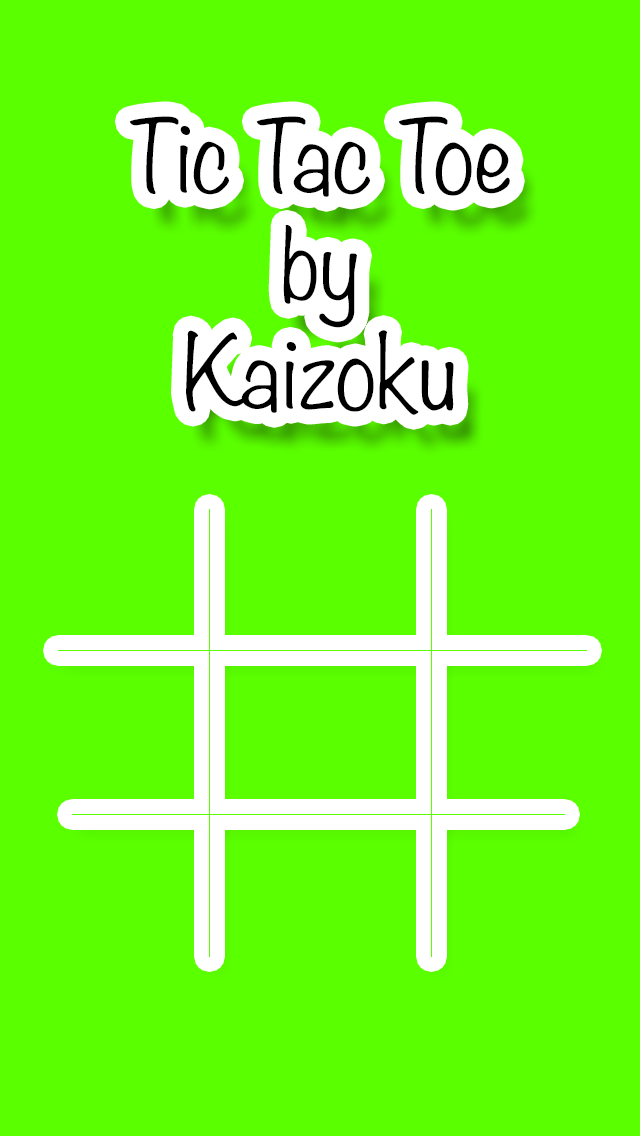
<style>
.page{position:relative;width:640px;height:1136px;background:#5aff00}
.page>*{position:absolute;margin:0}
.t1{font:90px "Noteworthy-Light";color:#000000}
</style>
<div class="page">
<p class="t1" style="left:129px;top:116px;width:381px;height:299px;text-align:center">Tic Tac Toe<br>by<br>Kaizoku</p>
</div>
